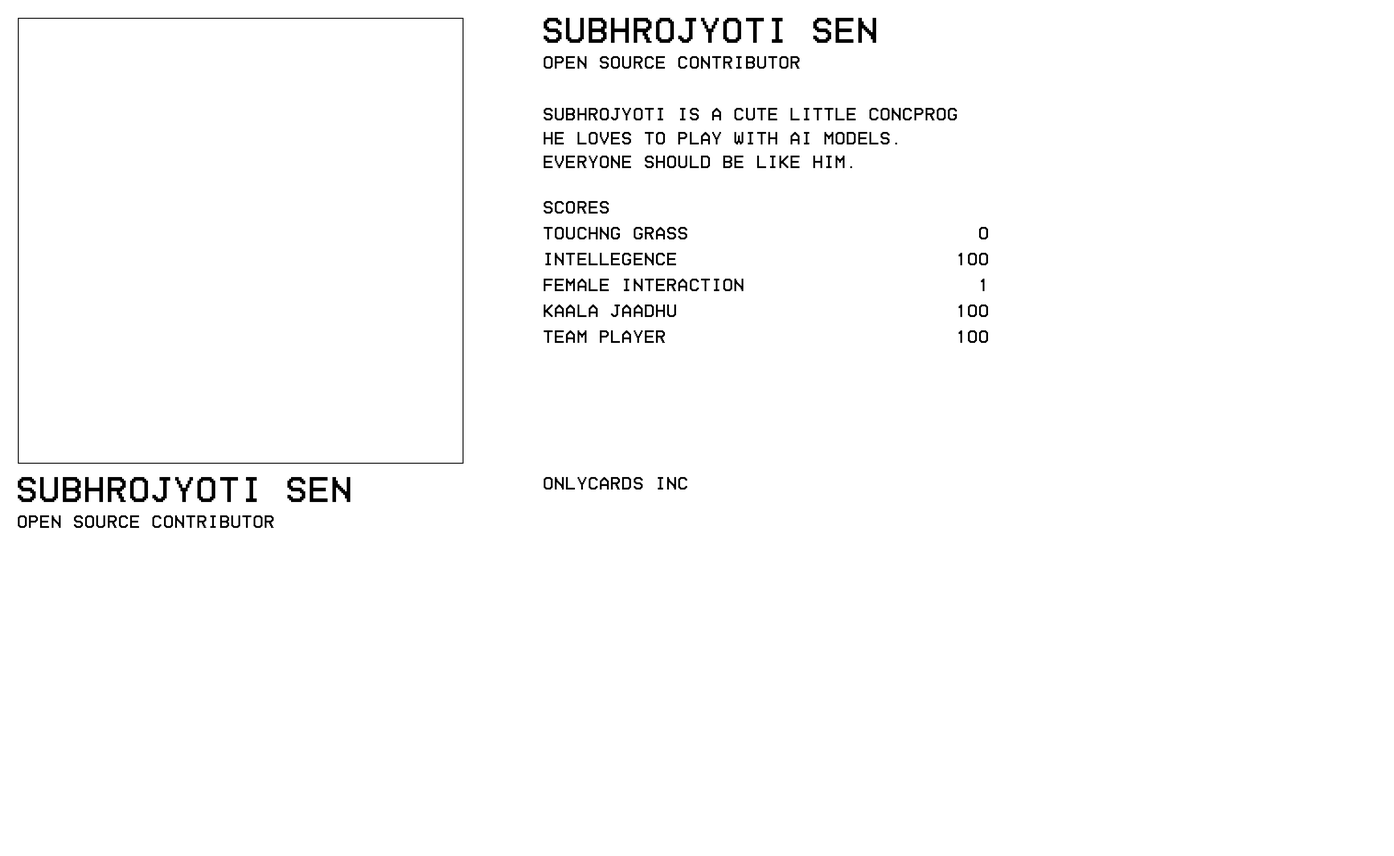
<style>
.page{position:relative;width:1394px;height:856px;background:#ffffff}
.page>*{position:absolute;margin:0}
.t1{font:35.6px "HomeVideo-Regular";letter-spacing:0.03em;color:#000000}
.t2{font:17.8px "HomeVideo-Regular";letter-spacing:0.03em;color:#000000}
.t3{font:17.8px/23.9px "HomeVideo-Regular";letter-spacing:0.03em;color:#000000}
</style>
<div class="page">
<p class="t1" style="left:544px;top:18px;width:332px;height:25px">SUBHROJYOTI SEN</p>
<p class="t2" style="left:544px;top:56px;width:255px;height:13px">Open source contributor</p>
<p class="t3" style="left:544px;top:108px;width:413px;height:60px">subhrojyoti is a cute little concprog<br>he loves to play with ai models.<br>everyone should be like him.</p>
<p class="t2" style="left:544px;top:201px;width:65px;height:12px">scores</p>
<p class="t2" style="left:544px;top:227px;width:143px;height:12px">touchng grass</p>
<p class="t2" style="left:979px;top:227px;width:9px;height:12px">0</p>
<p class="t2" style="left:545px;top:253px;width:131px;height:12px">intellegence</p>
<p class="t2" style="left:958px;top:253px;width:30px;height:12px">100</p>
<p class="t2" style="left:544px;top:278px;width:199px;height:13px">female interaction</p>
<p class="t2" style="left:981px;top:278px;width:3px;height:13px">1</p>
<p class="t2" style="left:544px;top:304px;width:132px;height:13px">kaala jaadhu</p>
<p class="t2" style="left:958px;top:304px;width:30px;height:13px">100</p>
<p class="t2" style="left:544px;top:330px;width:121px;height:13px">team player</p>
<p class="t2" style="left:958px;top:330px;width:30px;height:13px">100</p>
<p class="t1" style="left:18px;top:477px;width:332px;height:25px">SUBHROJYOTI SEN</p>
<p class="t2" style="left:544px;top:477px;width:143px;height:12px">onlycards inc</p>
<p class="t2" style="left:18px;top:515px;width:256px;height:13px">Open source contributor</p>
</div>
